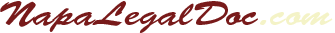
<style>
.page{position:relative;width:335px;height:33px;background:#ffffff}
.page>*{position:absolute;margin:0}
.t1{font:34px "BrushScriptStd";color:#781a1a;scale:1.24 1}
.t2{font:34px "BrushScriptStd";color:#f4f3c7;scale:1.24 1}
</style>
<div class="page">
<p class="t1" style="left:0px;top:1px;width:258px;height:32px">NapaLegalDoc</p>
<p class="t2" style="left:260px;top:12px;width:73px;height:13px">.com</p>
</div>
